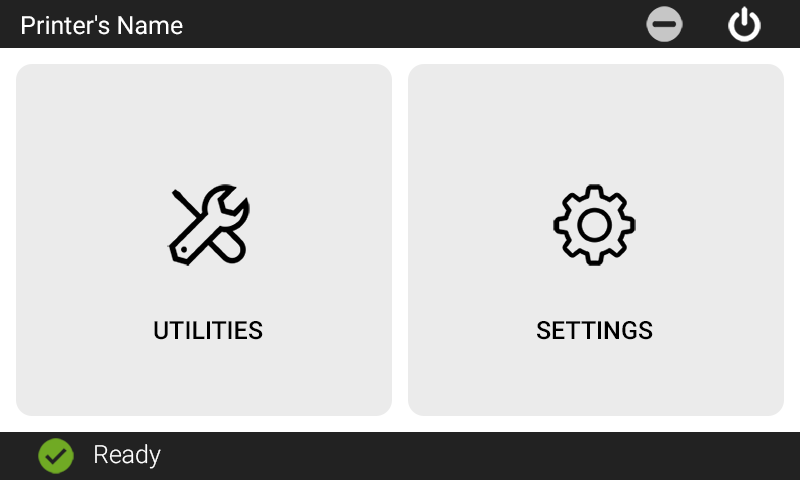
<style>
.page{position:relative;width:800px;height:480px;background:#ebebeb}
.page>*{position:absolute;margin:0}
.t1{font:25px "Roboto-Black";color:#ffffff}
.t2{font:25px "Roboto-Medium";color:#000000}
.t3{font:25px "Roboto-Light";color:#ffffff}
</style>
<div class="page">
<p class="t1" style="left:22px;top:15px;width:161px;height:20px">Printer's Name</p>
<p class="t2" style="left:154px;top:321px;width:109px;height:19px">UTILITIES</p>
<p class="t2" style="left:537px;top:321px;width:116px;height:19px">SETTINGS</p>
<p class="t3" style="left:95px;top:444px;width:66px;height:25px">Ready</p>
</div>
